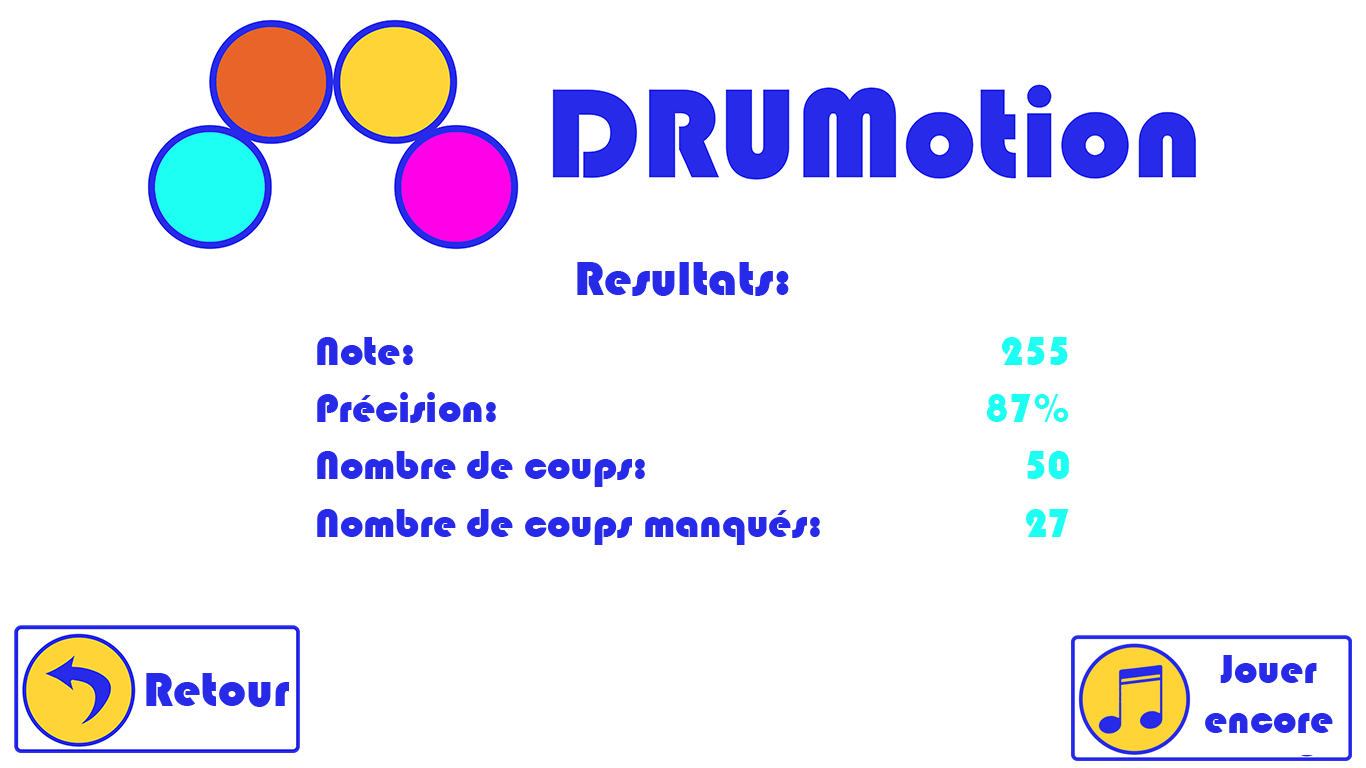
<style>
.page{position:relative;width:1366px;height:768px;background:#ffffff}
.page>*{position:absolute;margin:0}
.t1{font:50px "Bauhaus93";color:#272ae8}
.t2{font:41.7px "Bauhaus93";color:#272ae8}
.t3{font:41.7px "Bauhaus93";color:#1efff3}
</style>
<div class="page">
<p class="t1" style="left:577px;top:262px;width:212px;height:34px">Resultats:</p>
<p class="t2" style="left:317px;top:337px;width:503px;height:208px">Note: <br>Précision: <br>Nombre de coups: <br>Nombre de coups manqués:</p>
<p class="t3" style="left:987px;top:337px;width:82px;height:200px;text-align:right">255<br>87%<br>50<br>27</p>
<p class="t2" style="left:1205px;top:655px;width:128px;height:78px;text-align:center">Jouer encore</p>
<p class="t1" style="left:146px;top:673px;width:143px;height:34px">Retour</p>
</div>
